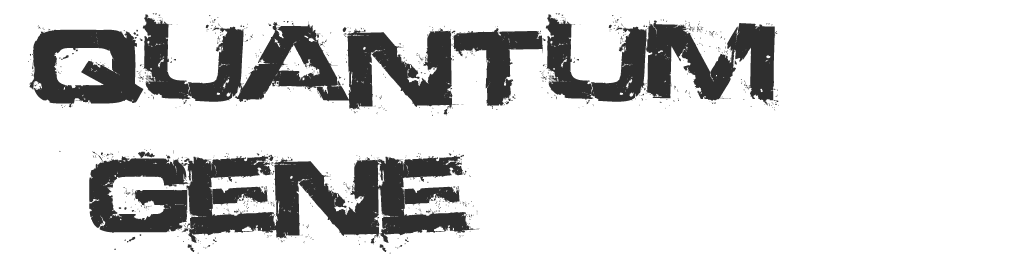
<style>
.page{position:relative;width:1024px;height:256px;background:#ffffff}
.page>*{position:absolute;margin:0}
.t1{font:107.5px "Defused-ExtendedBold";color:#2f2f2f;scale:1.04 1}
</style>
<div class="page">
<p class="t1" style="left:28px;top:13px;width:751px;height:241px">Quantum<br> Gene</p>
</div>
